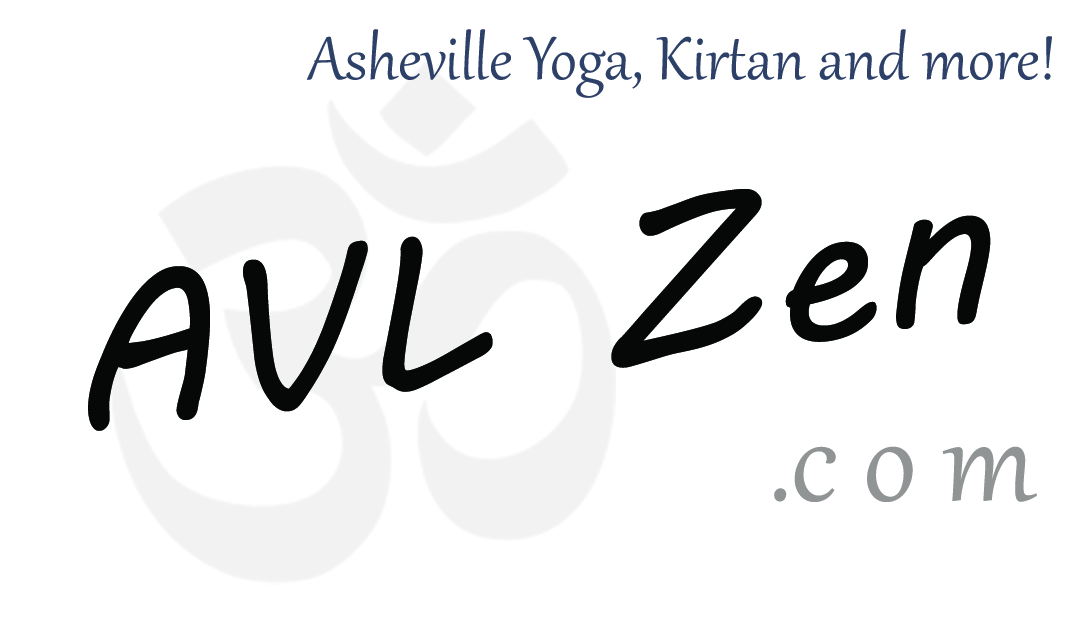
<style>
.page{position:relative;width:1085px;height:635px;background:#ffffff}
.page>*{position:absolute;margin:0}
.t1{font:75px "Gabriola";color:#2d4068}
.t2{font:216.7px "MVBoli";color:#070809}
.t3{font:150px "Gabriola";color:#909494}
</style>
<div class="page">
<p class="t1" style="left:306px;top:29px;width:746px;height:69px">Asheville Yoga, Kirtan and more!</p>
<p class="t2" style="left:88px;top:189px;width:903px;height:242px;rotate:-7deg">AVL Zen</p>
<p class="t3" style="left:774px;top:446px;width:263px;height:56px">.c o m</p>
</div>
